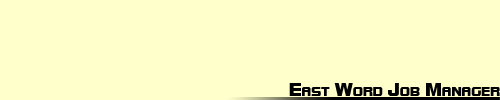
<style>
.page{position:relative;width:500px;height:100px;background:#ffffcc}
.page>*{position:absolute;margin:0}
.t1{font:18px "BoltsSF";color:#000000;font-variant:small-caps}
</style>
<div class="page">
<p class="t1" style="left:289px;top:83px;width:211px;height:13px">East Word Job Manager</p>
</div>
